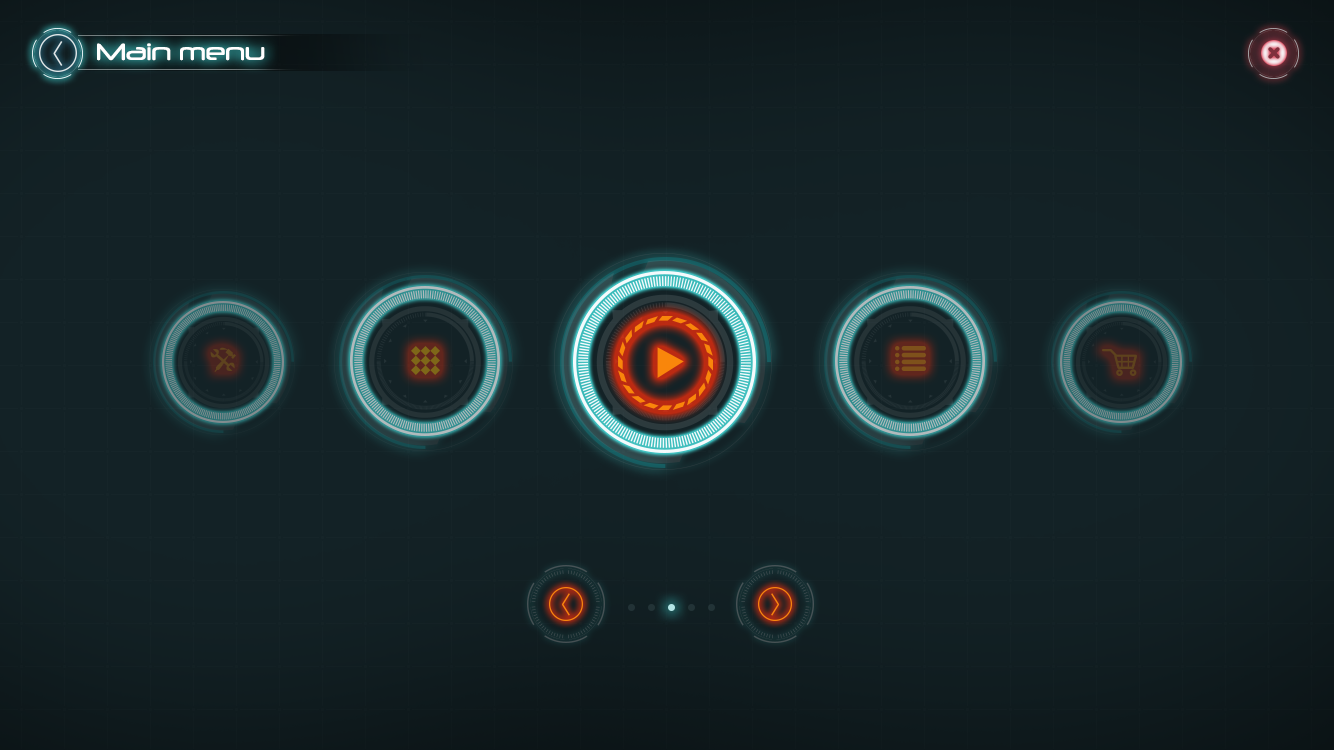
<style>
.page{position:relative;width:1334px;height:750px;background:#132226}
.page>*{position:absolute;margin:0}
.t1{font:22.6px "Neuropol-Regular";color:#ffffff}
</style>
<div class="page">
<p class="t1" style="left:97px;top:43px;width:168px;height:18px">Main menu</p>
</div>
